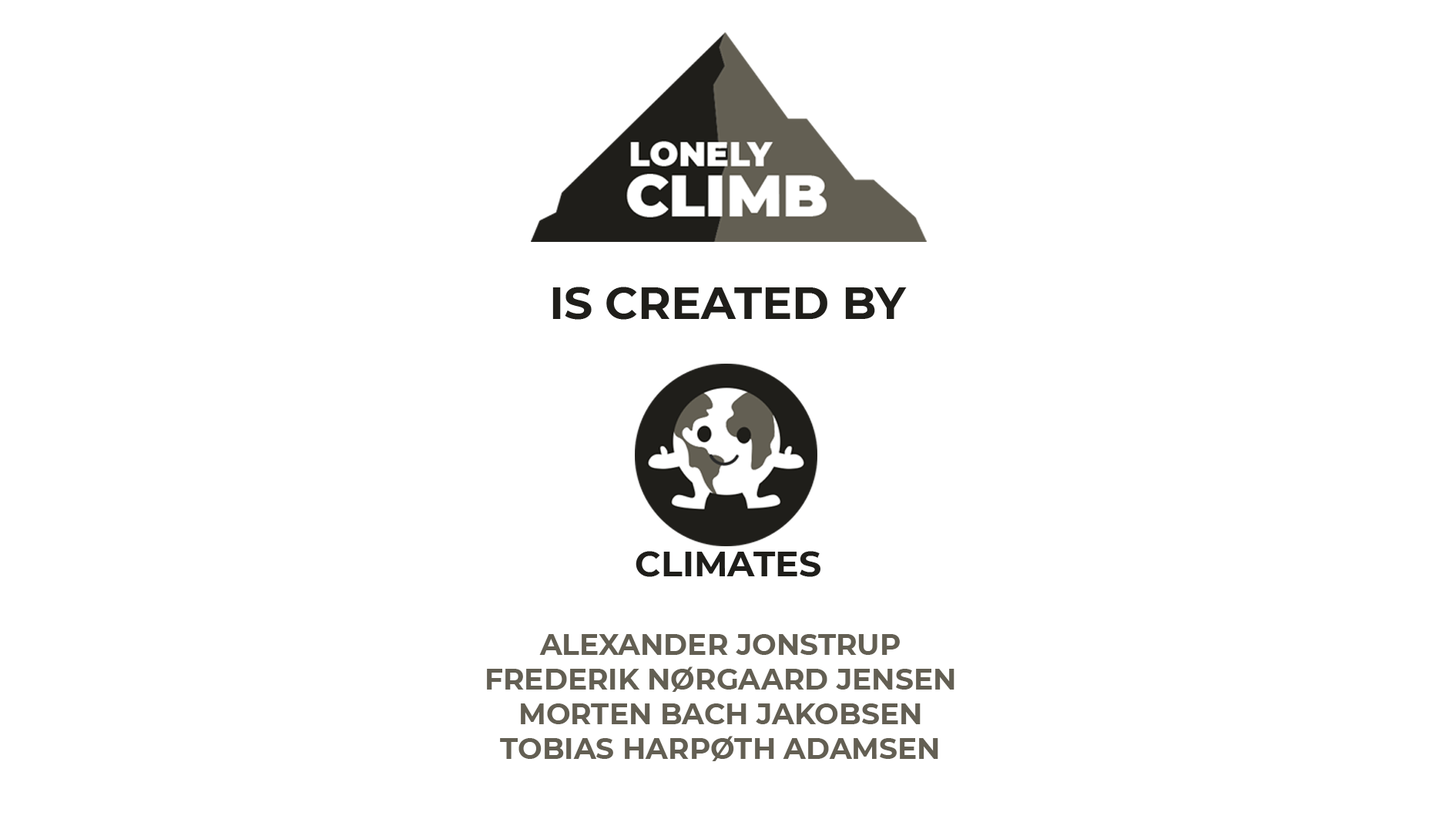
<style>
.page{position:relative;width:1456px;height:819px;background:#ffffff}
.page>*{position:absolute;margin:0}
.t1{font:44.9px "Montserrat-Bold";color:#1f1e1a}
.t2{font:35.3px "Montserrat-Bold";color:#1f1e1a}
.t3{font:28.9px "Montserrat-Bold";color:#635f53}
.t4{font:28.9px "Montserrat-Bold";color:#1f1e1a}
</style>
<div class="page">
<p class="t1" style="left:552px;top:287px;width:355px;height:33px">IS CREATED BY</p>
<p class="t2" style="left:636px;top:551px;width:184px;height:26px">CLIMATES</p>
<p class="t3" style="left:487px;top:634px;width:468px;height:127px;text-align:center"><span class="t4"><br></span>ALEXANDER JONSTRUP<br>FREDERIK NØRGAARD JENSEN<br>MORTEN BACH JAKOBSEN<br>TOBIAS HARPØTH ADAMSEN</p>
</div>
